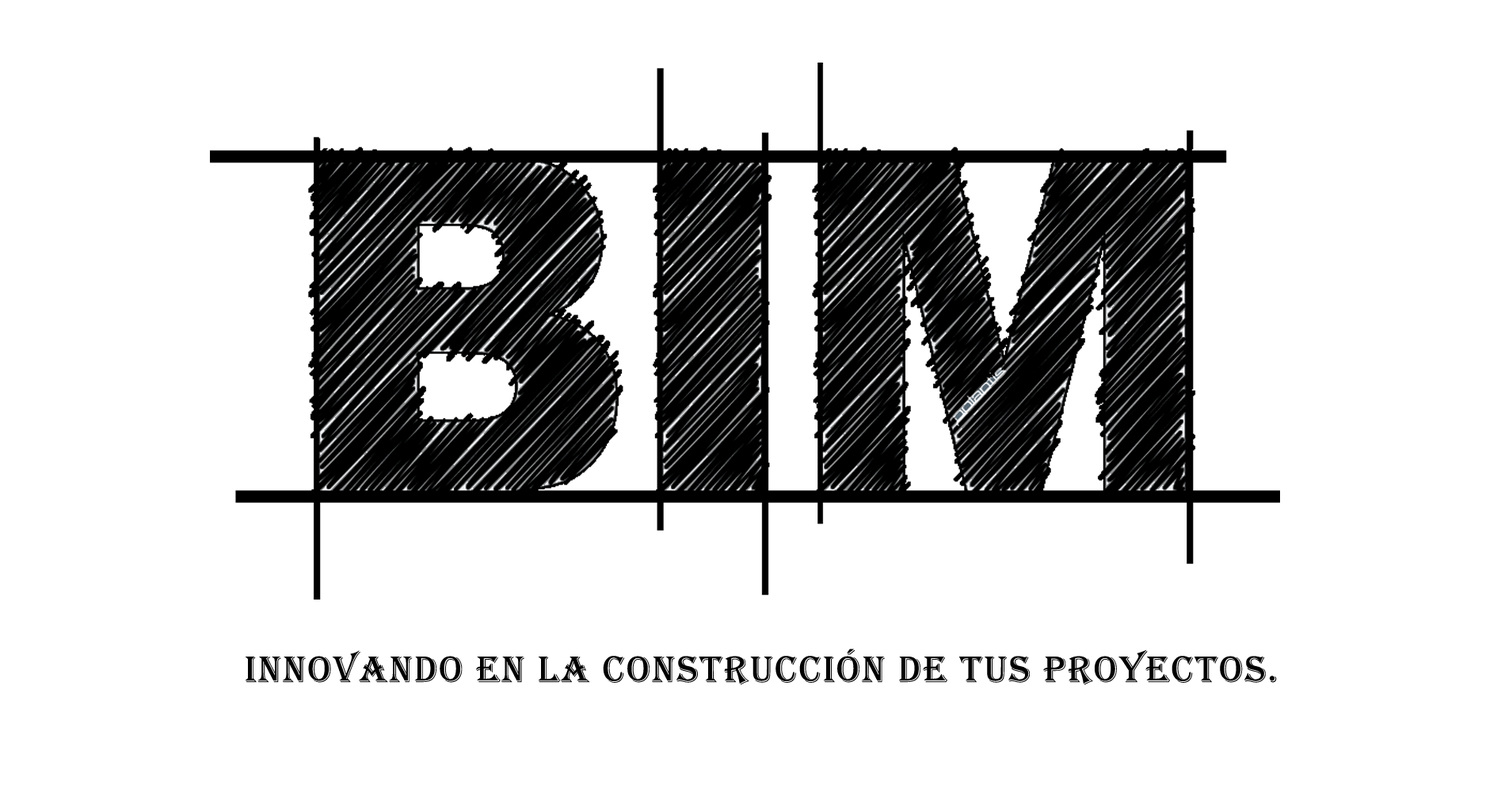
<style>
.page{position:relative;width:1505px;height:792px;background:#ffffff}
.page>*{position:absolute;margin:0}
.t1{font:38px "Algerian";letter-spacing:0.05em;color:#000000}
</style>
<div class="page">
<p class="t1" style="left:245px;top:649px;width:1032px;height:36px">Innovando en la construcción de tus proyectos.</p>
</div>
